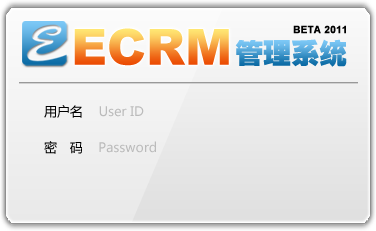
<style>
.page{position:relative;width:376px;height:231px}
.page>*{position:absolute;margin:0}
.t1{font:50px "Arial-Black"}
.t2{font:10px "Arial-BoldMT";color:#000000;font-weight:bold}
.t3{font:28px "FZCCHJW--GB1-0"}
.t4{font:13px/36px "MicrosoftYaHei";color:#bbbbbb}
.t5{font:13px/36px "MicrosoftYaHei";color:#000000}
</style>
<div class="page">
<p class="t1" style="left:74px;top:28px;width:155px;height:38px">ECRM</p>
<p class="t2" style="left:293px;top:25px;width:53px;height:9px">BETA 2011</p>
<p class="t3" style="left:235px;top:39px;width:112px;height:28px">管理系统</p>
<p class="t4" style="left:44px;top:105px;width:112px;height:49px;text-align:justify"><span class="t5">用户名    </span>User ID<br><span class="t5">密    码    </span>Password</p>
</div>
